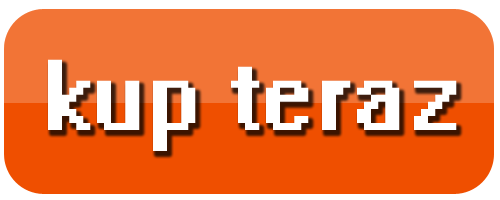
<style>
.page{position:relative;width:500px;height:200px;background:#f27436}
.page>*{position:absolute;margin:0}
.t1{font:90px "System";color:#ffffff}
</style>
<div class="page">
<p class="t1" style="left:48px;top:59px;width:409px;height:92px">kup teraz</p>
</div>
